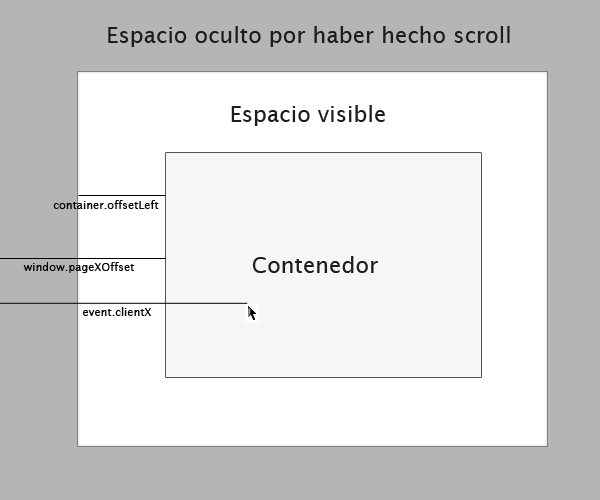
<style>
.page{position:relative;width:600px;height:500px;background:#b5b5b5}
.page>*{position:absolute;margin:0}
.t1{font:22.2px "LucidaSans";color:#1d1d1d}
.t2{font:11.1px "LucidaSans";color:#000000}
</style>
<div class="page">
<p class="t1" style="left:108px;top:26px;width:402px;height:21px">Espacio oculto por haber hecho scroll</p>
<p class="t1" style="left:231px;top:105px;width:154px;height:21px">Espacio visible</p>
<p class="t2" style="left:53px;top:200px;width:106px;height:9px">container.offsetLeft</p>
<p class="t1" style="left:252px;top:256px;width:126px;height:17px">Contenedor</p>
<p class="t2" style="left:23px;top:262px;width:112px;height:11px">window.pageXOffset</p>
<p class="t2" style="left:83px;top:307px;width:69px;height:9px">event.clientX</p>
</div>
